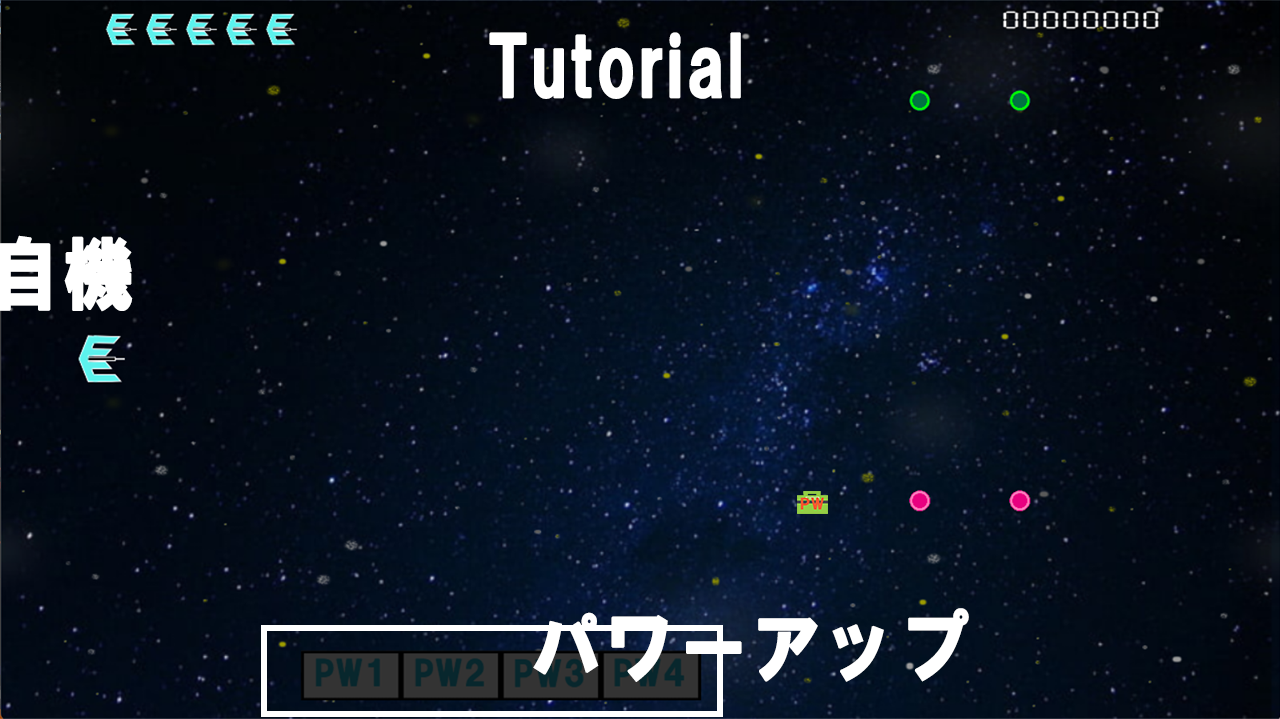
<style>
.page{position:relative;width:1280px;height:719px}
.page>*{position:absolute;margin:0}
.t1{font:79px "HGSSoeiKakugothicUB";letter-spacing:0.03em;color:#ffffff;font-weight:bold;scale:0.89 1}
</style>
<div class="page">
<p class="t1" style="left:489px;top:32px;width:252px;height:67px">Tutorial</p>
<p class="t1" style="left:0px;top:235px;width:133px;height:77px">自機</p>
<p class="t1" style="left:533px;top:608px;width:436px;height:74px">パワーアップ</p>
</div>
